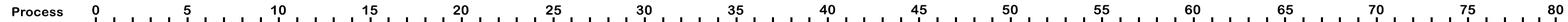
<style>
.page{position:relative;width:1568px;height:22px;background:#ffffff}
.page>*{position:absolute;margin:0}
.t1{font:12.7px "ArialRoundedMTBold";letter-spacing:0.02em;color:#000000;scale:1.06 1}
.t2{font:12px "ArialRoundedMTBold";letter-spacing:0.02em;color:#000000;scale:1.06 1}
</style>
<div class="page">
<p class="t1" style="left:92px;top:5px;width:7px;height:10px">0</p>
<p class="t1" style="left:184px;top:5px;width:7px;height:10px">5</p>
<p class="t1" style="left:271px;top:5px;width:15px;height:10px">10</p>
<p class="t1" style="left:362px;top:5px;width:16px;height:10px">15</p>
<p class="t1" style="left:453px;top:5px;width:16px;height:10px">20</p>
<p class="t1" style="left:546px;top:5px;width:15px;height:10px">25</p>
<p class="t1" style="left:637px;top:5px;width:15px;height:10px">30</p>
<p class="t1" style="left:728px;top:5px;width:16px;height:10px">35</p>
<p class="t1" style="left:819px;top:5px;width:17px;height:9px">40</p>
<p class="t1" style="left:911px;top:5px;width:16px;height:9px">45</p>
<p class="t1" style="left:1003px;top:5px;width:15px;height:9px">50</p>
<p class="t1" style="left:1094px;top:5px;width:16px;height:9px">55</p>
<p class="t1" style="left:1185px;top:5px;width:15px;height:9px">60</p>
<p class="t1" style="left:1277px;top:5px;width:16px;height:9px">65</p>
<p class="t1" style="left:1369px;top:5px;width:15px;height:9px">70</p>
<p class="t1" style="left:1460px;top:5px;width:15px;height:9px">75</p>
<p class="t1" style="left:1548px;top:5px;width:15px;height:9px">80</p>
<p class="t2" style="left:12px;top:7px;width:51px;height:9px">Process</p>
</div>
